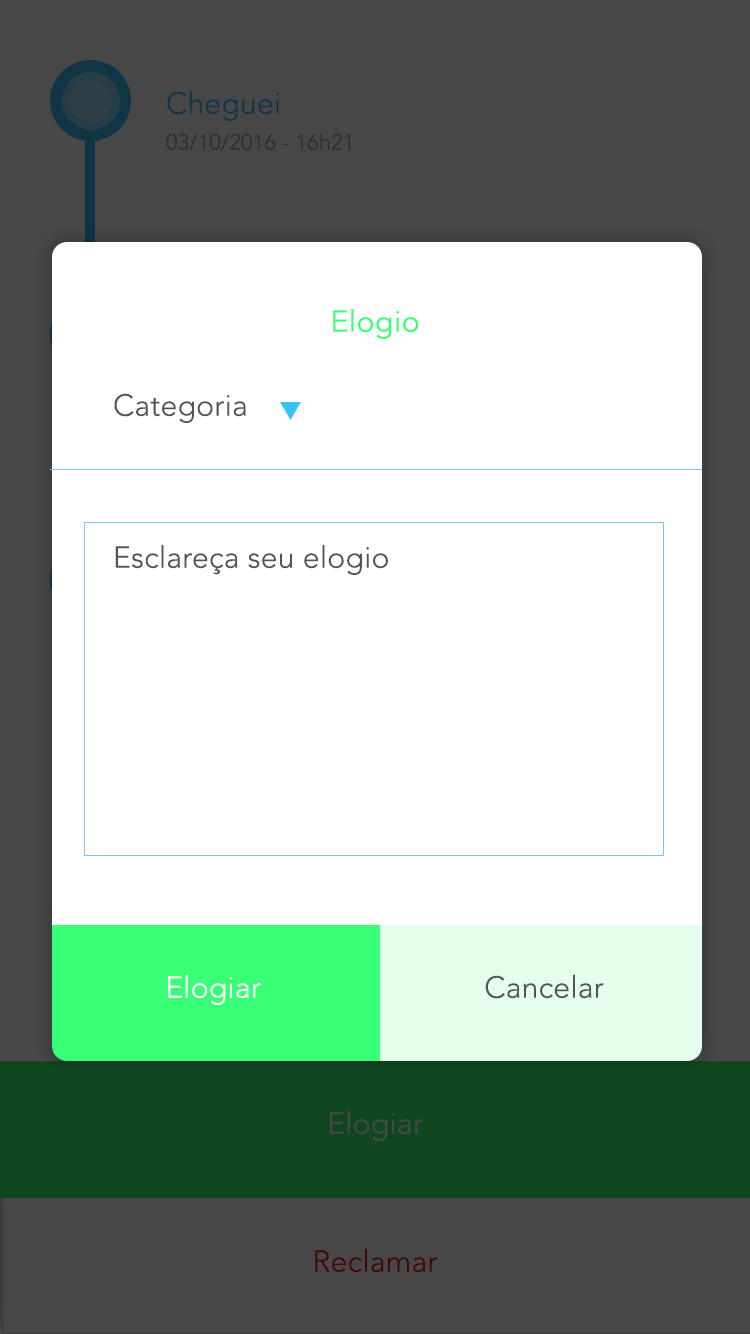
<style>
.page{position:relative;width:750px;height:1334px;background:#ffffff}
.page>*{position:absolute;margin:0}
.t1{font:30px "AvenirLTStd-Light";letter-spacing:0.01em;color:#103547}
.t2{font:22px "AvenirLTStd-Light";letter-spacing:0.01em;color:#2d2e2e}
.t3{font:30px "AvenirLTStd-Book";letter-spacing:0.02em;color:#39ff76}
.t4{font:30px "AvenirLTStd-Light";letter-spacing:0.01em;color:#535354}
.t5{font:30px "AvenirLTStd-Light";letter-spacing:0.01em;color:#ffffff}
.t6{font:30px "AvenirLTStd-Light";letter-spacing:0.01em;color:#474747}
.t7{font:30px "AvenirLTStd-Light";letter-spacing:0.01em;color:#410707}
</style>
<div class="page">
<p class="t1" style="left:167px;top:90px;width:112px;height:31px">Cheguei</p>
<p class="t2" style="left:166px;top:132px;width:184px;height:19px">03/10/2016 - 16h21</p>
<p class="t3" style="left:333px;top:309px;width:86px;height:30px">Elogio</p>
<p class="t4" style="left:114px;top:393px;width:132px;height:30px">Categoria</p>
<p class="t4" style="left:115px;top:545px;width:273px;height:30px">Esclareça seu elogio</p>
<p class="t5" style="left:168px;top:974px;width:93px;height:31px">Elogiar</p>
<p class="t4" style="left:485px;top:974px;width:119px;height:25px">Cancelar</p>
<p class="t6" style="left:330px;top:1110px;width:93px;height:31px">Elogiar</p>
<p class="t7" style="left:315px;top:1248px;width:123px;height:25px">Reclamar</p>
</div>
